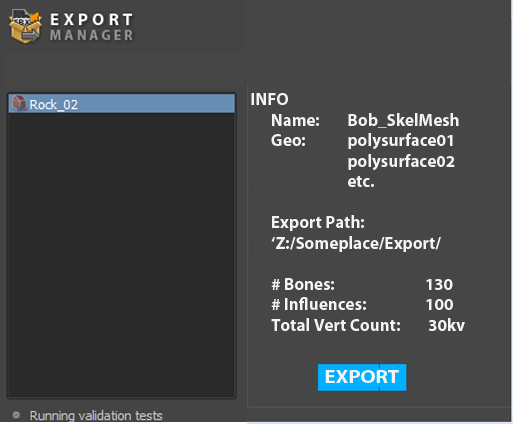
<style>
.page{position:relative;width:513px;height:424px;background:#464646}
.page>*{position:absolute;margin:0}
.t1{font:17.1px "MyriadPro-Bold";color:#f4f4f4}
.t2{font:18.9px "MyriadPro-Bold";color:#f4f4f4;scale:1.1 1}
</style>
<div class="page">
<p class="t1" style="left:251px;top:93px;width:214px;height:238px">INFO<br> Name:        Bob_SkelMesh<br> Geo:            polysurface01<br>                            polysurface02<br>                            etc.<br><br> Export Path:<br> ‘Z:/Someplace/Export/<br><br> # Bones:                          130<br> # Influences:                 100<br> Total Vert Count:        30kv</p>
<p class="t2" style="left:325px;top:370px;width:74px;height:13px">EXPORT</p>
</div>
